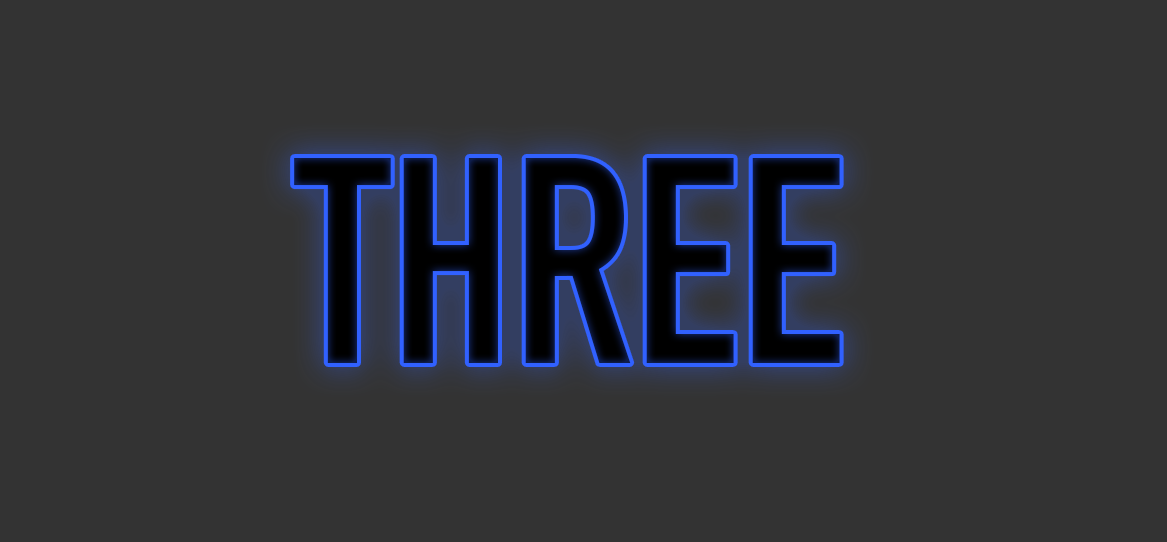
<style>
.page{position:relative;width:1167px;height:542px;background:#333333}
.page>*{position:absolute;margin:0}
.t1{font:285.8px "DINEngschrift";color:#010205}
</style>
<div class="page">
<p class="t1" style="left:294px;top:158px;width:546px;height:205px">THREE</p>
</div>
